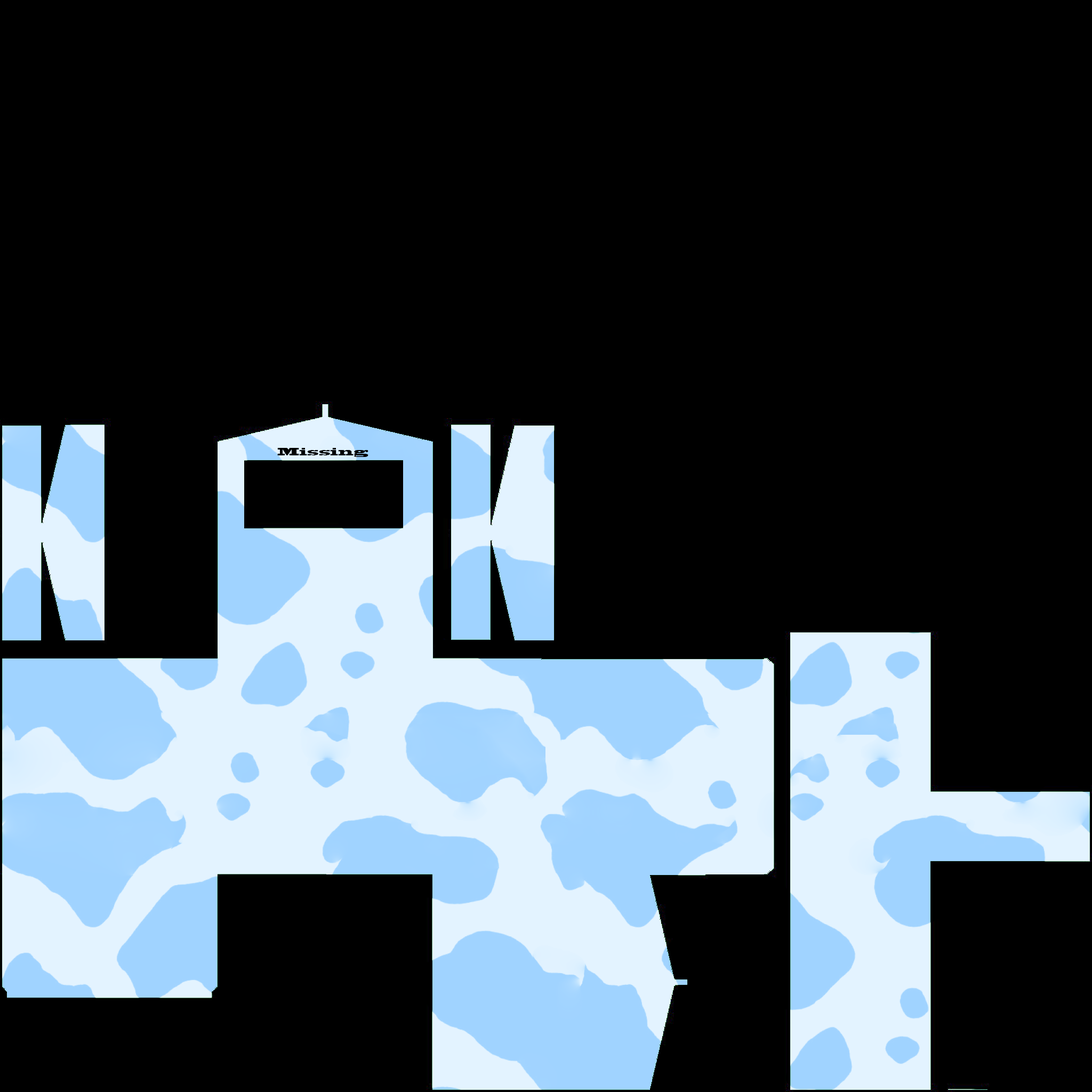
<style>
.page{position:relative;width:1092px;height:1092px;background:#000000}
.page>*{position:absolute;margin:0}
.t1{font:9.6px "BlackoakStd";color:#000000}
</style>
<div class="page">
<p class="t1" style="left:277px;top:448px;width:91px;height:9px">Missing</p>
</div>
